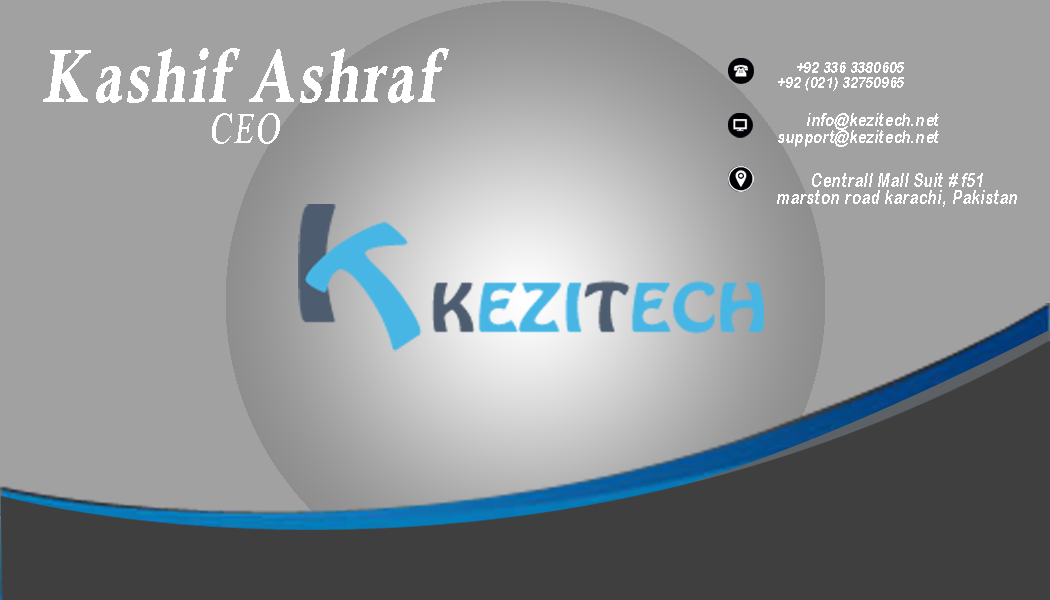
<style>
.page{position:relative;width:1050px;height:600px;background:#a2a1a1}
.page>*{position:absolute;margin:0}
.t1{font:75.8px "CalisMTBol";letter-spacing:0.05em;color:#ffffff;font-style:italic;scale:0.77 1}
.t2{font:16.3px "ArialRoundedMTBold";letter-spacing:0.05em;color:#ffffff;font-style:italic;scale:0.77 1}
.t3{font:43.3px "IskoolaPota";letter-spacing:0.05em;color:#fefefe;font-style:italic;scale:0.77 1}
.t4{font:17.9px "ArialRoundedMTBold";letter-spacing:0.05em;color:#ffffff;font-style:italic;scale:0.77 1}
.t5{font:18.9px "ArialRoundedMTBold";letter-spacing:0.05em;color:#ffffff;font-style:italic;scale:0.77 1}
</style>
<div class="page">
<p class="t1" style="left:43px;top:48px;width:406px;height:55px">Kashif Ashraf</p>
<p class="t2" style="left:778px;top:62px;width:126px;height:29px;text-align:right">+92 336 3380605<br>+92 (021) 32750965</p>
<p class="t3" style="left:212px;top:113px;width:68px;height:31px">CEO</p>
<p class="t4" style="left:778px;top:113px;width:161px;height:34px;text-align:right">info@kezitech.net<br>support@kezitech.net</p>
<p class="t5" style="left:777px;top:173px;width:240px;height:34px;text-align:center">Centrall Mall Suit # f51<br>marston road karachi, Pakistan</p>
</div>
